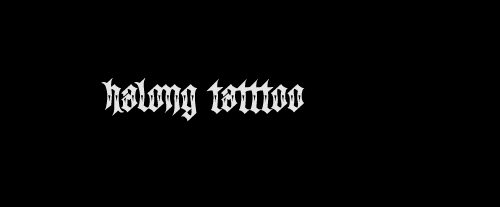
<style>
.page{position:relative;width:500px;height:207px;background:#000000}
.page>*{position:absolute;margin:0}
.t1{font:40px "WalkDaWalkTwo";color:#e5e5e5}
</style>
<div class="page">
<p class="t1" style="left:101px;top:78px;width:204px;height:44px">HaLong Tatttoo</p>
</div>
